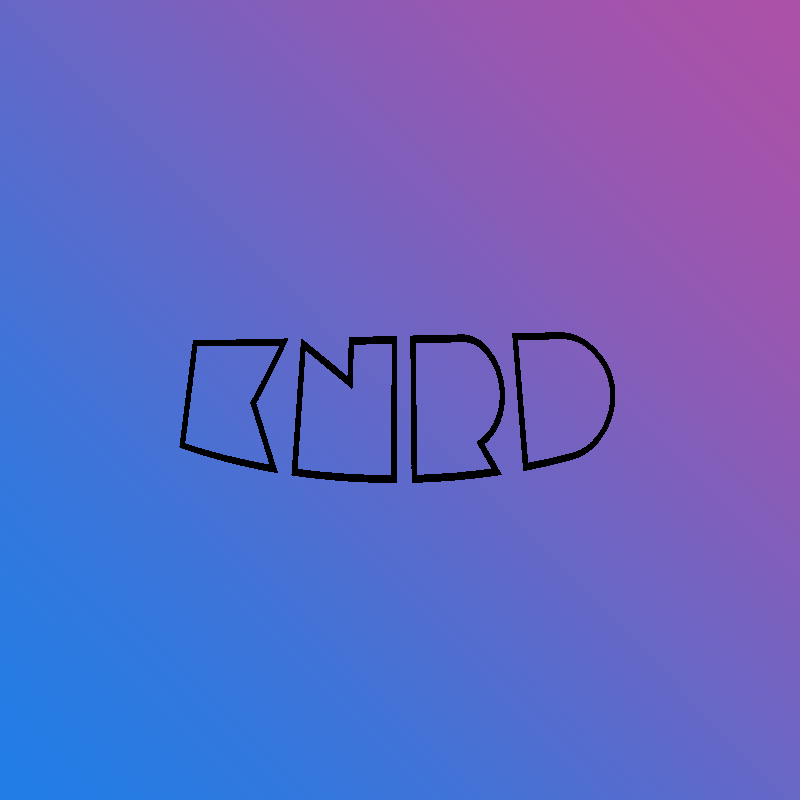
<style>
.page{position:relative;width:800px;height:800px}
.page>*{position:absolute;margin:0}
.t1{font:150px "DubtronicInline";color:#000000}
</style>
<div class="page">
<p class="t1" style="left:179px;top:332px;width:438px;height:151px">KNRD</p>
</div>
